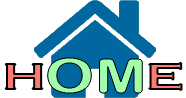
<style>
.page{position:relative;width:186px;height:98px;background:#ffffff}
.page>*{position:absolute;margin:0}
.t1{font:48px "Copperplate";scale:1.3 1}
.t2{font:48px "ArialRoundedMTBold";color:#a1fdac;scale:1.3 1}
</style>
<div class="page">
<p class="t1" style="left:5px;top:63px;width:177px;height:27px">H     E</p>
<p class="t2" style="left:47px;top:58px;width:96px;height:35px">OM</p>
</div>
